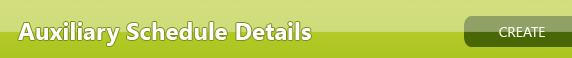
<style>
.page{position:relative;width:572px;height:58px}
.page>*{position:absolute;margin:0}
.t1{font:24px "SegoeUI-Bold";color:#fefefe}
.t2{font:14px "SegoeUI";color:#f6f7f1}
</style>
<div class="page">
<p class="t1" style="left:18px;top:22px;width:293px;height:24px">Auxiliary Schedule Details</p>
<p class="t2" style="left:499px;top:27px;width:46px;height:10px">CREATE</p>
</div>
